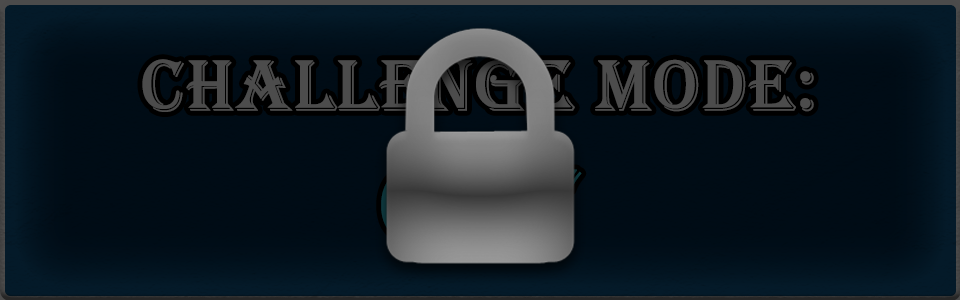
<style>
.page{position:relative;width:960px;height:300px}
.page>*{position:absolute;margin:0}
.t1{font:74.6px "Algerian";color:#4c4c4c;font-weight:bold}
.t2{font:111.9px "Algerian";color:#4c4c4c;font-weight:bold}
</style>
<div class="page">
<p class="t1" style="left:142px;top:59px;width:672px;height:187px;text-align:center">Challenge Mode:<br><span class="t2">OFF</span></p>
</div>
